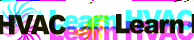
<style>
.page{position:relative;width:194px;height:40px;background:#ffffff}
.page>*{position:absolute;margin:0}
.t1{font:26.7px "Arial-Black";letter-spacing:-0.06em;scale:0.91 1}
</style>
<div class="page">
<p class="t1" style="left:50px;top:9px;width:144px;height:21px">Learn HVAC</p>
</div>
